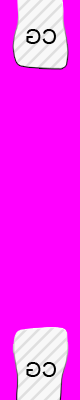
<style>
.page{position:relative;width:80px;height:400px;background:#ff00ff}
.page>*{position:absolute;margin:0}
.t1{font:21.3px "ArialMT";color:#010101}
</style>
<div class="page">
<p class="t1" style="left:26px;top:29px;width:30px;height:15px;rotate:180deg">CG</p>
<p class="t1" style="left:26px;top:362px;width:30px;height:15px;rotate:180deg">CG</p>
</div>
